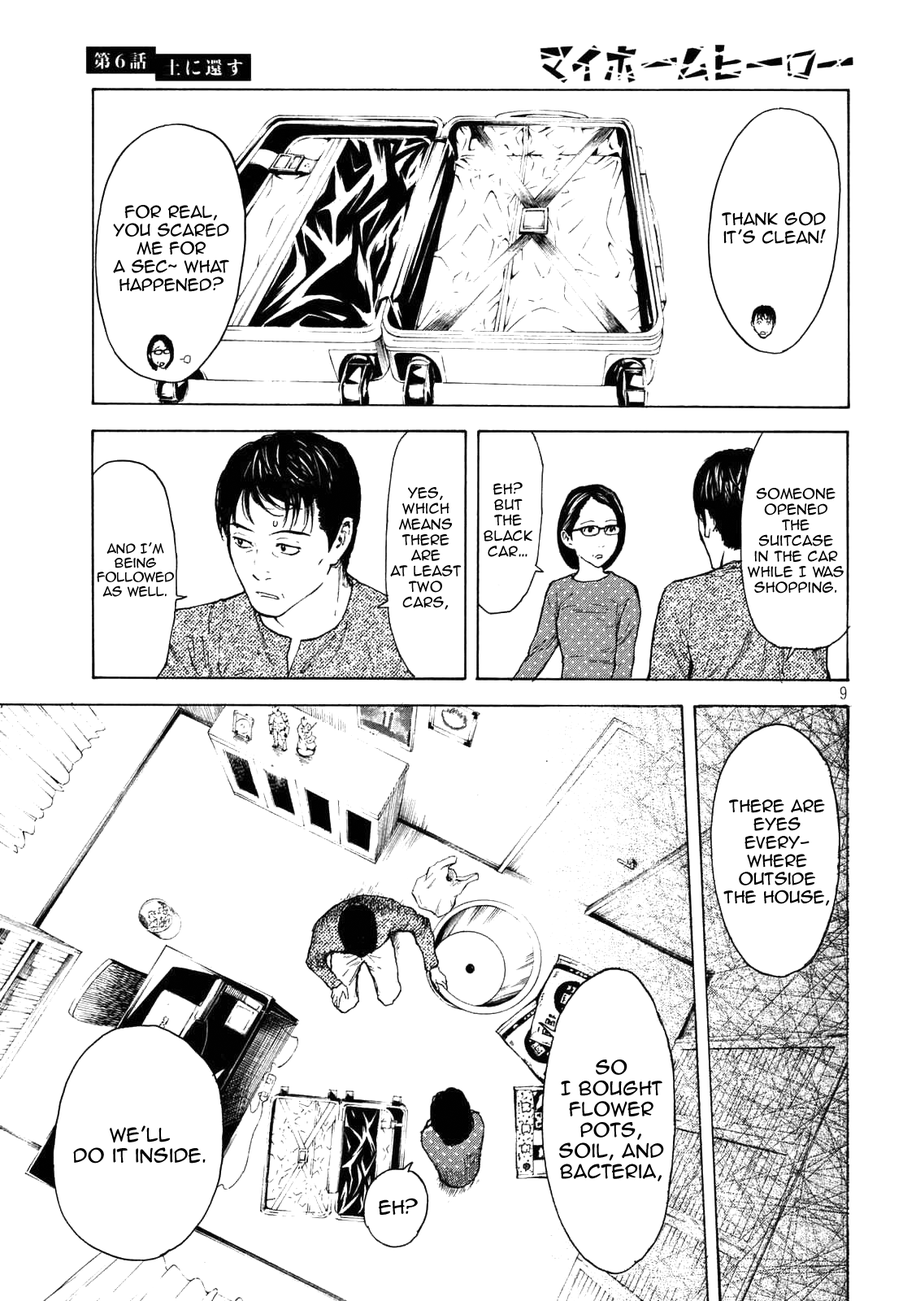
<style>
.page{position:relative;width:916px;height:1301px;background:#ffffff}
.page>*{position:absolute;margin:0}
.t1{font:15.2px "AnimeAce2.0BB";color:#000000}
.t2{font:13px "AnimeAce2.0BB";color:#000000}
.t3{font:11.9px "AnimeAce2.0BB";color:#000000}
.t4{font:17.4px "AnimeAce2.0BB";color:#000000}
</style>
<div class="page">
<p class="t1" style="left:113px;top:205px;width:116px;height:87px;text-align:center">For real, you scared me for <br>a sec~ What happened?</p>
<p class="t1" style="left:722px;top:211px;width:104px;height:33px;text-align:center">Thank god it’s clean!</p>
<p class="t2" style="left:484px;top:482px;width:49px;height:75px;text-align:center">Eh? <br>But the black car…</p>
<p class="t2" style="left:390px;top:487px;width:72px;height:123px;text-align:center">Yes, <br>which means there are <br>at least two cars,</p>
<p class="t2" style="left:747px;top:487px;width:97px;height:107px;text-align:center">Someone opened <br>the suitcase <br>in the car while I was shopping.</p>
<p class="t3" style="left:97px;top:542px;width:77px;height:55px;text-align:center">and I’m being followed as well.</p>
<p class="t1" style="left:724px;top:799px;width:106px;height:107px;text-align:center">There are eyes every-<br>where outside <br>the house,</p>
<p class="t4" style="left:559px;top:1060px;width:105px;height:122px;text-align:center">So <br>I bought flower pots, soil, and bacteria,</p>
<p class="t4" style="left:73px;top:1125px;width:133px;height:39px;text-align:center">We’ll <br>do it inside.</p>
<p class="t4" style="left:379px;top:1198px;width:39px;height:17px">Eh?</p>
</div>
